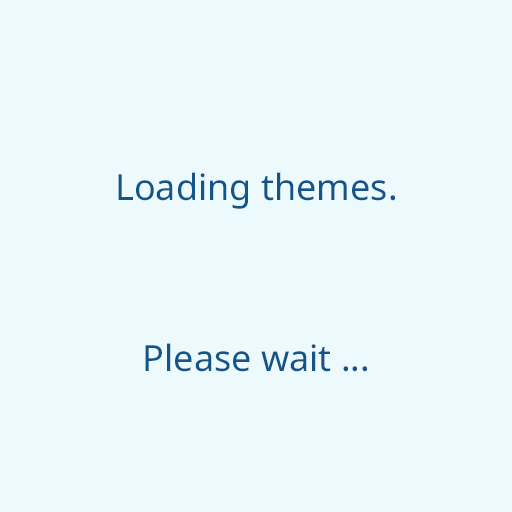
<style>
.page{position:relative;width:512px;height:512px;background:#edfafd}
.page>*{position:absolute;margin:0}
.t1{font:36px "NotoSans-Regular";color:#135589}
</style>
<div class="page">
<p class="t1" style="left:118px;top:172px;width:277px;height:37px">Loading themes.</p>
<p class="t1" style="left:145px;top:343px;width:222px;height:29px">Please wait ...</p>
</div>
